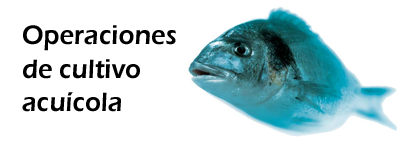
<style>
.page{position:relative;width:400px;height:150px;background:#ffffff}
.page>*{position:absolute;margin:0}
.t1{font:27.6px "ErasITC-Demi";color:#000000;scale:0.94 1}
</style>
<div class="page">
<p class="t1" style="left:22px;top:25px;width:154px;height:87px">Operaciones de cultivo acuícola</p>
</div>
